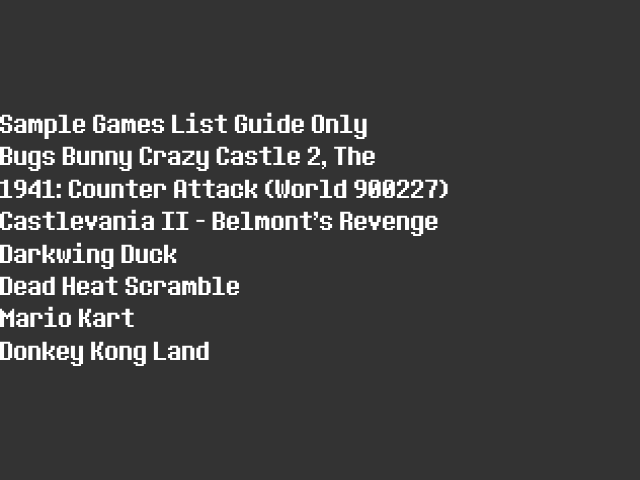
<style>
.page{position:relative;width:640px;height:480px;background:#333333}
.page>*{position:absolute;margin:0}
.t1{font:27px "DeterminationSans";color:#ffffff}
</style>
<div class="page">
<p class="t1" style="left:0px;top:112px;width:448px;height:255px">Sample Games List Guide Only<br>Bugs Bunny Crazy Castle 2, The<br>1941: Counter Attack (World 900227)<br>Castlevania II - Belmont's Revenge<br>Darkwing Duck<br>Dead Heat Scramble<br>Mario Kart<br>Donkey Kong Land</p>
</div>
